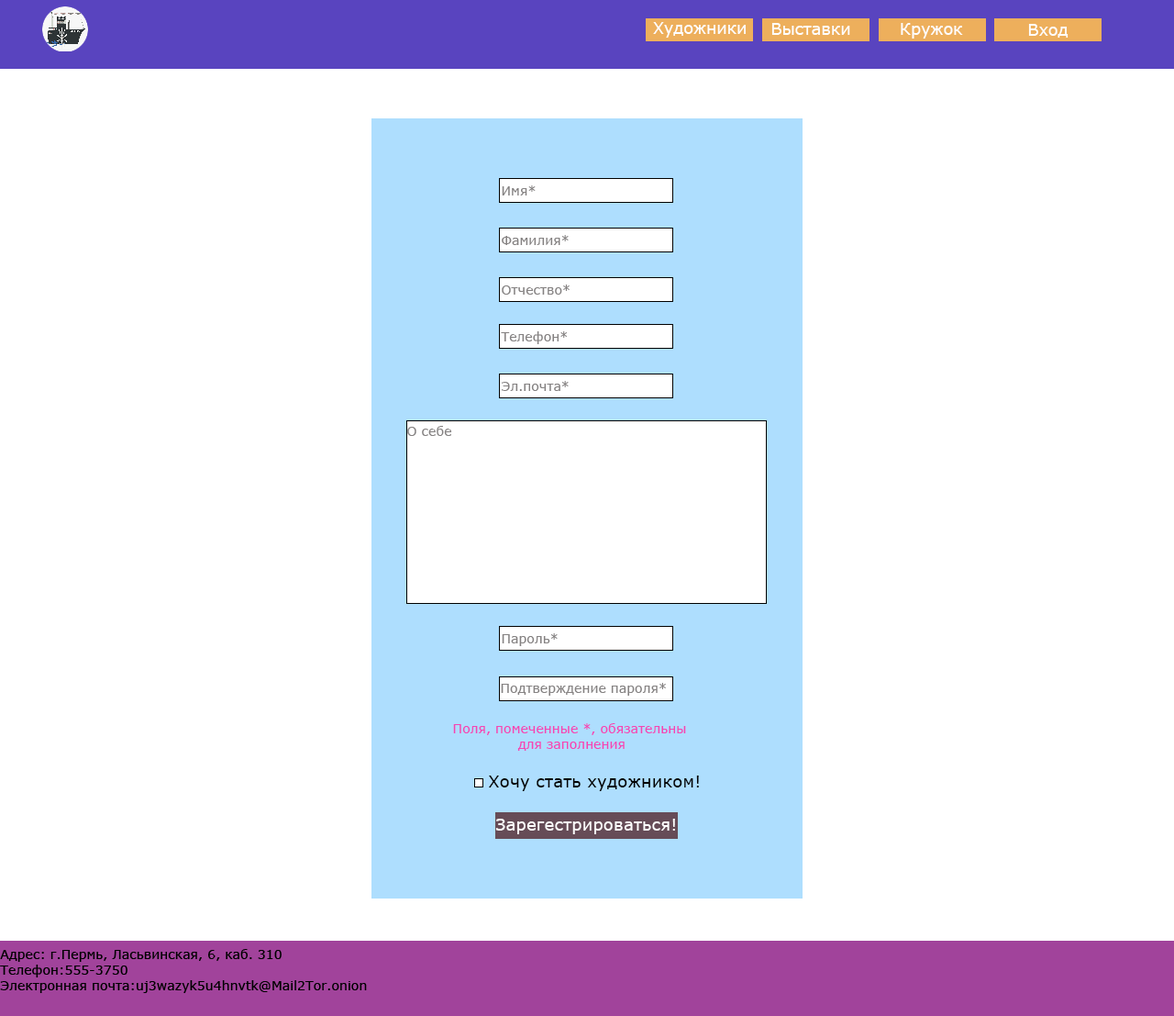
<style>
.page{position:relative;width:1174px;height:1016px;background:#ffffff}
.page>*{position:absolute;margin:0}
.t1{font:16.2px "Verdana";color:#fefefe}
.t2{font:12.9px "Verdana";color:#858282}
.t3{font:12.9px "Verdana";color:#f445b4}
.t4{font:16.8px "Verdana";color:#010101}
.t5{font:16.8px "Verdana";color:#fefefe}
.t6{font:12.9px "Verdana";color:#000000}
</style>
<div class="page">
<p class="t1" style="left:653px;top:22px;width:93px;height:16px">Художники</p>
<p class="t1" style="left:771px;top:23px;width:79px;height:12px">Выставки</p>
<p class="t1" style="left:901px;top:23px;width:62px;height:16px">Кружок</p>
<p class="t1" style="left:1028px;top:24px;width:41px;height:14px">Вход</p>
<p class="t2" style="left:502px;top:185px;width:34px;height:10px">Имя*</p>
<p class="t2" style="left:502px;top:235px;width:67px;height:10px">Фамилия*</p>
<p class="t2" style="left:502px;top:284px;width:68px;height:10px">Отчество*</p>
<p class="t2" style="left:501px;top:331px;width:67px;height:13px">Телефон*</p>
<p class="t2" style="left:502px;top:381px;width:67px;height:10px">Эл.почта*</p>
<p class="t2" style="left:407px;top:426px;width:45px;height:10px">О себе</p>
<p class="t2" style="left:502px;top:633px;width:56px;height:13px">Пароль*</p>
<p class="t2" style="left:501px;top:683px;width:165px;height:12px">Подтверждение пароля*</p>
<p class="t3" style="left:453px;top:723px;width:233px;height:27px;text-align:center">Поля, помеченные *, обязательны <br>для заполнения</p>
<p class="t4" style="left:489px;top:775px;width:210px;height:16px">Хочу стать художником!</p>
<p class="t5" style="left:495px;top:818px;width:180px;height:16px">Зарегестрироваться!</p>
<p class="t6" style="left:0px;top:949px;width:367px;height:44px">Адрес: г.Пермь, Ласьвинская, 6, каб. 310<br>Телефон:555-3750<br>Электронная почта:uj3wazyk5u4hnvtk@Mail2Tor.onion</p>
</div>
